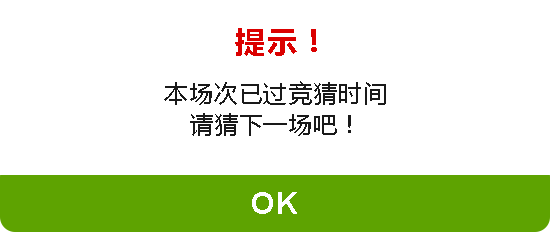
<style>
.page{position:relative;width:550px;height:232px;background:#ffffff}
.page>*{position:absolute;margin:0}
.t1{font:30px "MicrosoftYaHei-Bold";letter-spacing:0.04em;color:#db0000}
.t2{font:24px/30.8px "MicrosoftYaHei";letter-spacing:0.04em;color:#191919}
.t3{font:30px "Arial-BoldMT";letter-spacing:0.04em;color:#ffffff}
</style>
<div class="page">
<p class="t1" style="left:235px;top:28px;width:82px;height:28px">提示！</p>
<p class="t2" style="left:164px;top:81px;width:222px;height:55px;text-align:center">本场次已过竞猜时间<br>请猜下一场吧！</p>
<p class="t3" style="left:252px;top:192px;width:45px;height:22px">OK</p>
</div>
